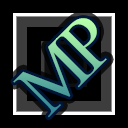
<style>
.page{position:relative;width:128px;height:128px;background:#000000}
.page>*{position:absolute;margin:0}
.t1{font:76px "TimesNewRomanPSMT";letter-spacing:-0.05em}
</style>
<div class="page">
<p class="t1" style="left:13px;top:18px;width:94px;height:100px;rotate:-45deg">MP</p>
</div>
